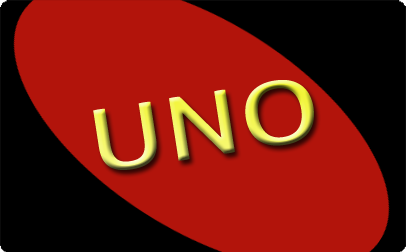
<style>
.page{position:relative;width:406px;height:252px;background:#b2140b}
.page>*{position:absolute;margin:0}
.t1{font:87.4px "Aller";scale:1.28 1}
</style>
<div class="page">
<p class="t1" style="left:93px;top:80px;width:221px;height:90px;rotate:-9deg">UNO</p>
</div>
